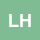
<style>
.page{position:relative;width:40px;height:40px;background:#80bc93}
.page>*{position:absolute;margin:0}
.t1{font:18px "Arial-BoldMT";color:#ffffff}
</style>
<div class="page">
<p class="t1" style="left:9px;top:14px;width:22px;height:13px">LH</p>
</div>
